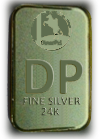
<style>
.page{position:relative;width:100px;height:139px}
.page>*{position:absolute;margin:0}
.t1{font:54.4px "Calibri-Bold";color:#6d7e58}
.t2{font:12px/10.7px "Calibri-Bold"}
</style>
<div class="page">
<p class="t1" style="left:25px;top:59px;width:59px;height:35px">DP</p>
<p class="t2" style="left:23px;top:97px;width:58px;height:19px;text-align:center">FINE SILVER<br>24K</p>
</div>
